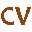
<style>
.page{position:relative;width:32px;height:32px;background:#ffffff}
.page>*{position:absolute;margin:0}
.t1{font:28px "Candara-Bold";color:#8b4513}
</style>
<div class="page">
<p class="t1" style="left:1px;top:7px;width:30px;height:18px">CV</p>
</div>
